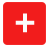
<style>
.page{position:relative;width:50px;height:50px;background:#f21c1c}
.page>*{position:absolute;margin:0}
.t1{font:36px "MicrosoftYaHei-Bold";letter-spacing:0.1em;color:#fcfbfb}
</style>
<div class="page">
<p class="t1" style="left:15px;top:13px;width:20px;height:20px">+</p>
</div>
